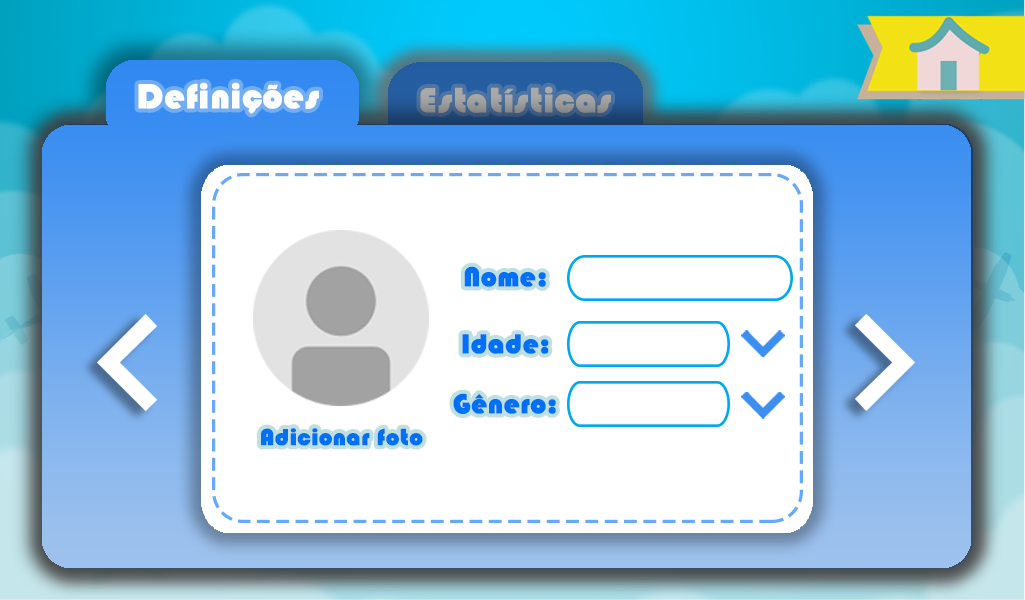
<style>
.page{position:relative;width:1025px;height:600px;background:#ffffff}
.page>*{position:absolute;margin:0}
.t1{font:36px "Blippo-Heavy";color:#ffffff;font-weight:bold}
.t2{font:28.3px "Blippo-Heavy";color:#0070f8;font-weight:bold}
.t3{font:24px "Blippo-Heavy";color:#0070f8;font-weight:bold}
</style>
<div class="page">
<p class="t1" style="left:138px;top:82px;width:181px;height:32px">Definições</p>
<p class="t2" style="left:464px;top:266px;width:82px;height:21px">Nome:</p>
<p class="t2" style="left:462px;top:334px;width:87px;height:20px">Idade:</p>
<p class="t2" style="left:453px;top:393px;width:103px;height:21px">Gênero:</p>
<p class="t3" style="left:261px;top:428px;width:162px;height:18px">Adicionar foto</p>
</div>
